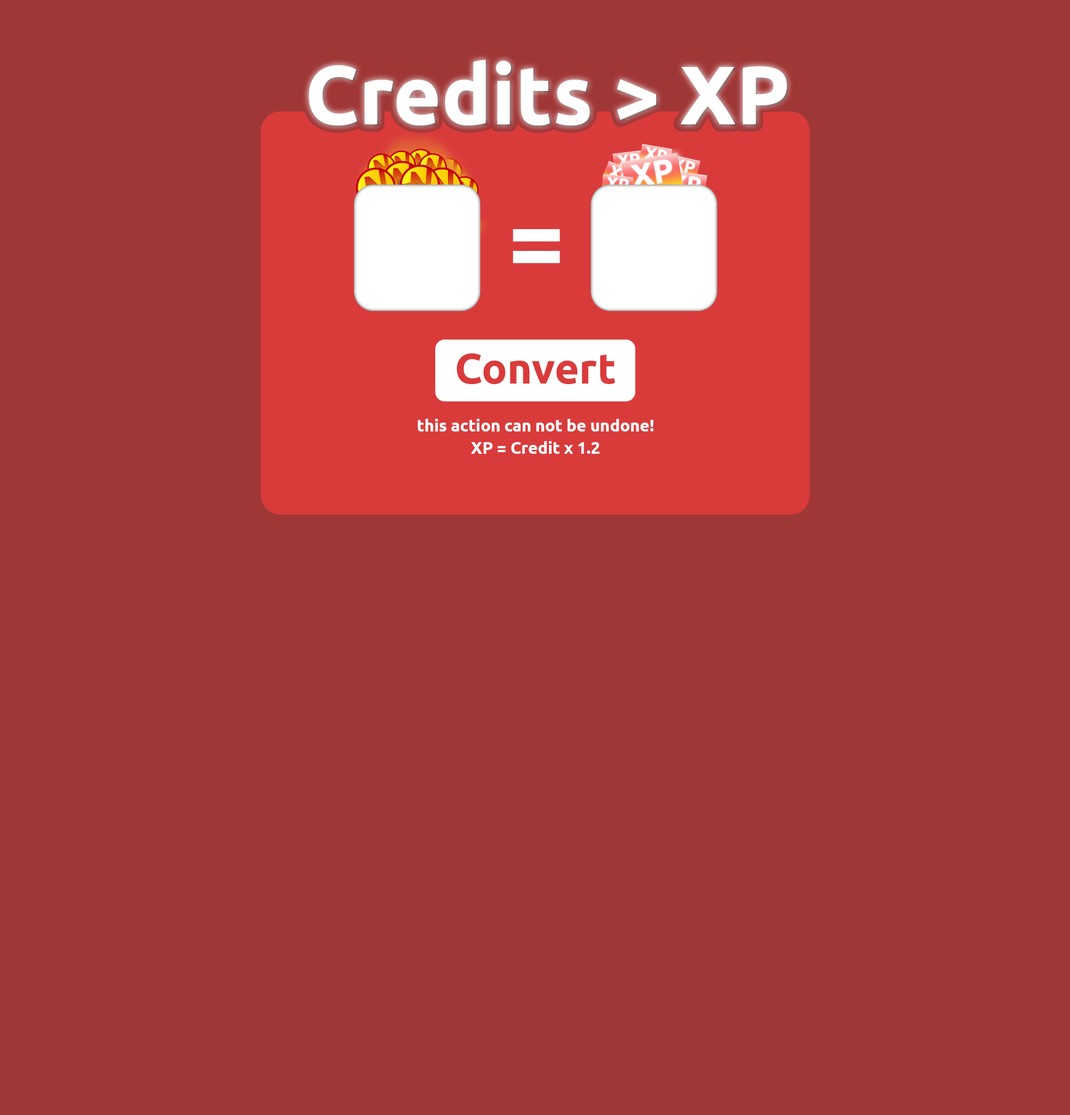
<style>
.page{position:relative;width:1070px;height:1115px;background:#a03737}
.page>*{position:absolute;margin:0}
.t1{font:83px "Ubuntu-Bold";color:#ffffff}
.t2{font:99.1px "Ubuntu-Bold";color:#ffffff}
.t3{font:42.6px "Ubuntu-Bold";color:#d93b3b}
.t4{font:16.6px "Ubuntu-Bold";color:#ffffff}
</style>
<div class="page">
<p class="t1" style="left:309px;top:60px;width:478px;height:65px">Credits &gt; XP</p>
<p class="t2" style="left:513px;top:229px;width:47px;height:34px">=</p>
<p class="t3" style="left:456px;top:353px;width:159px;height:31px">Convert</p>
<p class="t4" style="left:417px;top:418px;width:237px;height:13px">this action can not be undone!</p>
<p class="t4" style="left:471px;top:441px;width:129px;height:13px">XP = Credit x 1.2</p>
</div>
